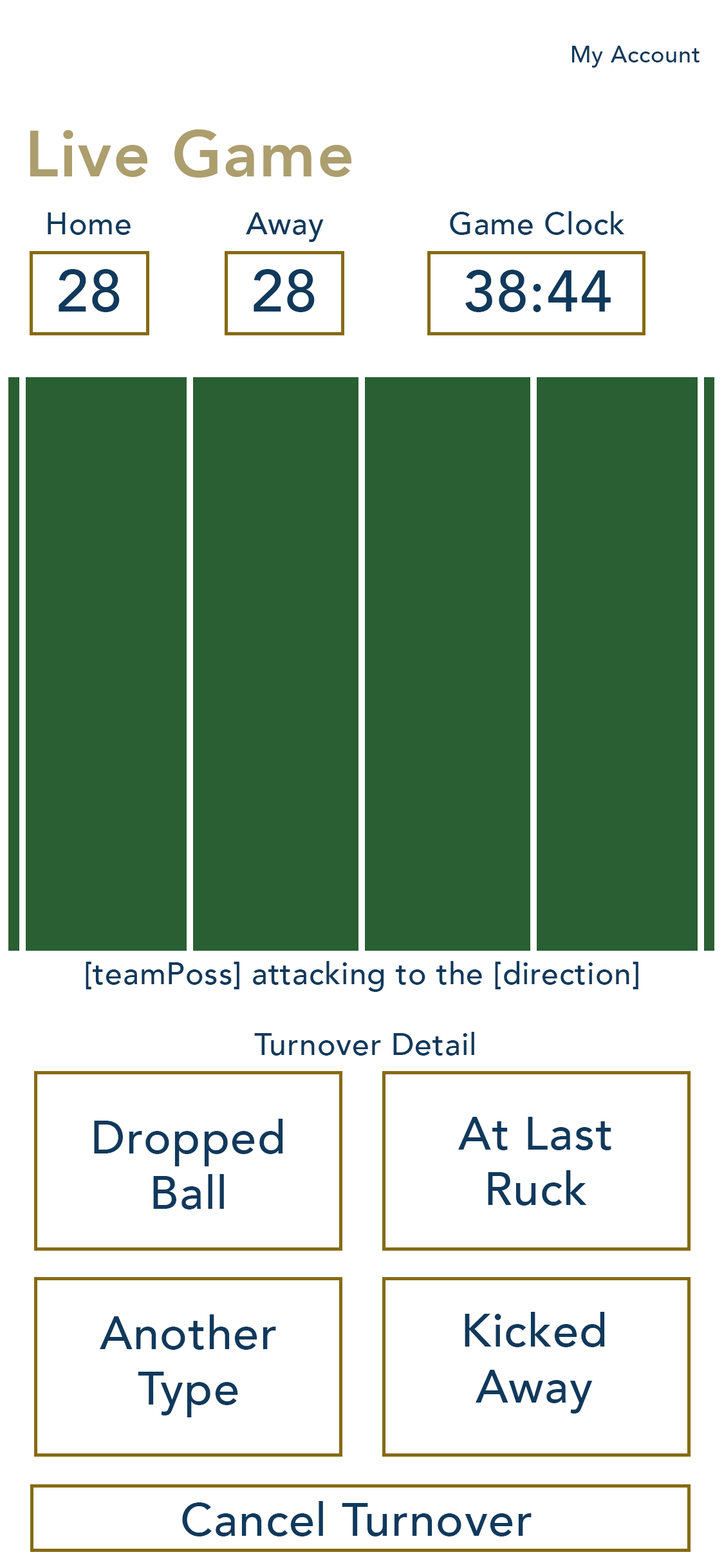
<style>
.page{position:relative;width:724px;height:1568px;background:#ffffff}
.page>*{position:absolute;margin:0}
.t1{font:23.2px "Avenir-Medium";letter-spacing:0.021em;color:#10395c}
.t2{font:64.6px "Avenir-Heavy";letter-spacing:0.021em;color:#ad9e6e}
.t3{font:30.9px "Avenir-Medium";letter-spacing:0.021em;color:#10395c}
.t4{font:58.4px "Avenir-Medium";letter-spacing:0.021em;color:#10395c}
.t5{font:57.9px "Avenir-Medium";letter-spacing:0.021em;color:#10395c}
.t6{font:46.3px "Avenir-Medium";letter-spacing:0.021em;color:#10395c}
</style>
<div class="page">
<p class="t1" style="left:572px;top:46px;width:128px;height:22px">My Account</p>
<p class="t2" style="left:30px;top:129px;width:321px;height:49px">Live Game</p>
<p class="t3" style="left:48px;top:212px;width:83px;height:23px">Home</p>
<p class="t3" style="left:246px;top:212px;width:78px;height:30px">Away</p>
<p class="t3" style="left:450px;top:211px;width:175px;height:24px">Game Clock</p>
<p class="t4" style="left:59px;top:269px;width:61px;height:43px">28</p>
<p class="t4" style="left:254px;top:269px;width:61px;height:43px">28</p>
<p class="t5" style="left:465px;top:270px;width:146px;height:42px">38:44</p>
<p class="t3" style="left:86px;top:961px;width:553px;height:31px">[teamPoss] attacking to the [direction]</p>
<p class="t3" style="left:254px;top:1032px;width:220px;height:24px">Turnover Detail</p>
<p class="t6" style="left:94px;top:1119px;width:189px;height:90px;text-align:center">Dropped<br>Ball</p>
<p class="t6" style="left:458px;top:1117px;width:153px;height:89px;text-align:center">At Last<br>Ruck</p>
<p class="t6" style="left:465px;top:1312px;width:140px;height:102px;text-align:center">Kicked<br>Away</p>
<p class="t6" style="left:100px;top:1314px;width:176px;height:103px;text-align:center">Another<br>Type</p>
<p class="t6" style="left:182px;top:1501px;width:350px;height:35px">Cancel Turnover</p>
</div>
